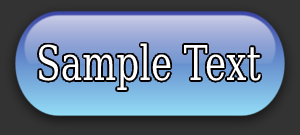
<style>
.page{position:relative;width:300px;height:135px}
.page>*{position:absolute;margin:0}
.t1{font:48px "BitstreamVeraSerif-Roman";color:#ffffff;scale:0.75 1}
</style>
<div class="page">
<p class="t1" style="left:39px;top:43px;width:222px;height:47px">Sample Text</p>
</div>
